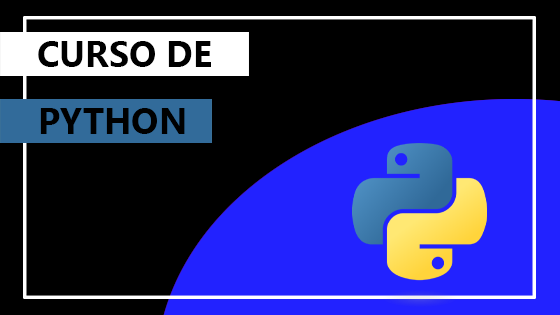
<style>
.page{position:relative;width:560px;height:315px;background:#000000}
.page>*{position:absolute;margin:0}
.t1{font:36px "SegoeUI-Bold";color:#000000}
</style>
<div class="page">
<p class="t1" style="left:38px;top:41px;width:173px;height:26px">CURSO DE</p>
<p class="t1" style="left:40px;top:108px;width:145px;height:26px">PYTHON</p>
</div>
